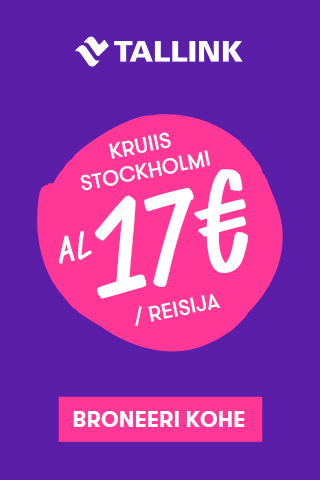
<style>
.page{position:relative;width:320px;height:480px;background:#5a1ea9}
.page>*{position:absolute;margin:0}
.t1{font:21.3px "GTWalsheimProMedium";color:#ffffff}
.t2{font:124.5px "TallinkScript-Bold";letter-spacing:-0.023em;color:#ffffff}
.t3{font:32.9px "TallinkScript-Bold";letter-spacing:-0.023em;color:#ffffff}
.t4{font:22px "GTWalsheimProBold";letter-spacing:0.002em;color:#ffffff}
</style>
<div class="page">
<p class="t1" style="left:80px;top:132px;width:130px;height:59px;text-align:center">KRUIIS<br>STOCKHOLMI</p>
<p class="t2" style="left:94px;top:169px;width:154px;height:130px">17€</p>
<p class="t3" style="left:58px;top:231px;width:34px;height:33px">aL</p>
<p class="t1" style="left:135px;top:294px;width:86px;height:32px">/ REISIJA</p>
<p class="t4" style="left:73px;top:411px;width:172px;height:16px">BRONEERI KOHE</p>
<p class="t4" style="left:73px;top:411px;width:172px;height:16px">BRONEERI KOHE</p>
</div>
